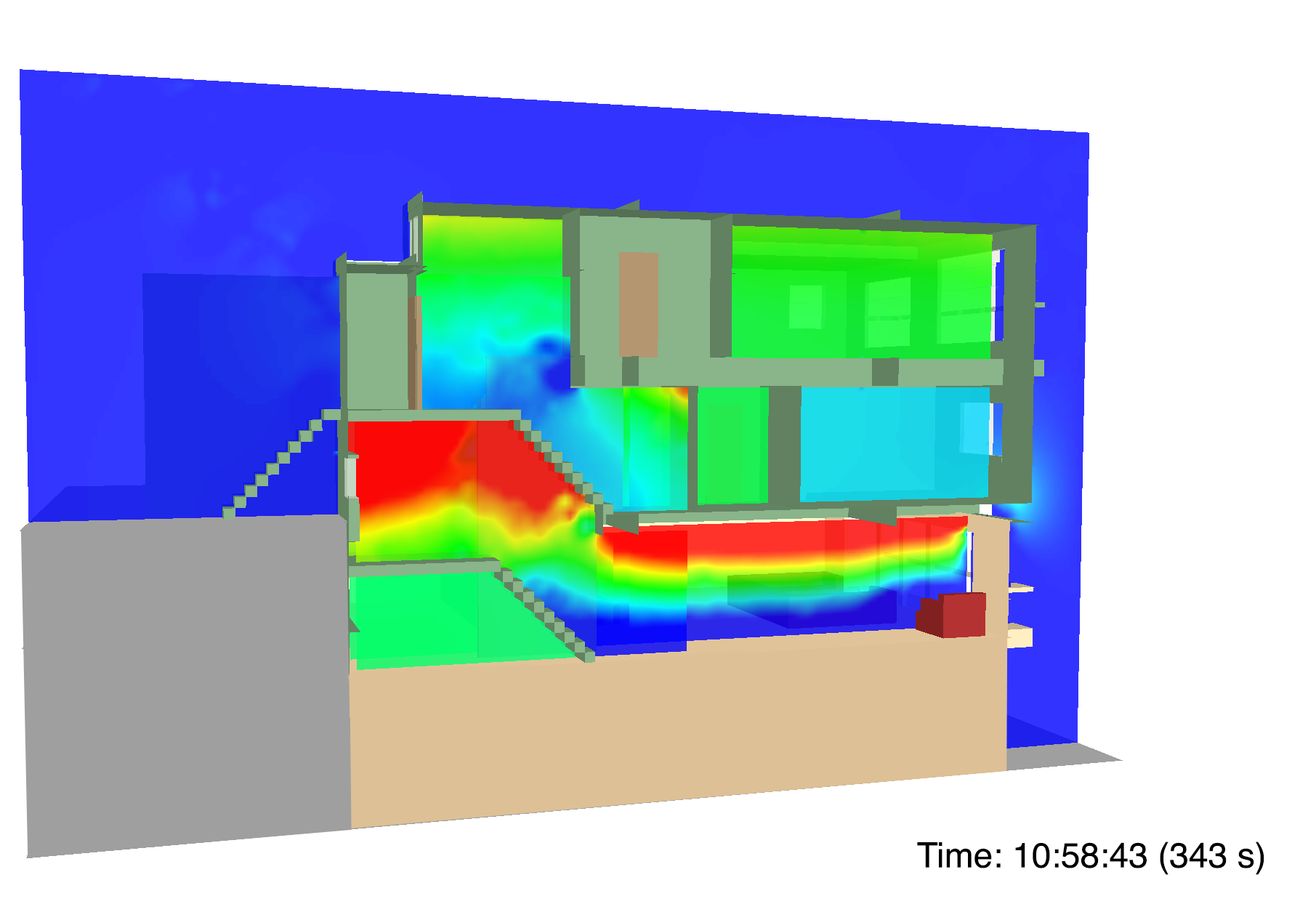
<style>
.page{position:relative;width:1308px;height:912px;background:#ffffff}
.page>*{position:absolute;margin:0}
.t1{font:34.9px "Helvetica";color:#000000}
</style>
<div class="page">
<p class="t1" style="left:917px;top:841px;width:347px;height:34px">Time: 10:58:43 (343 s)</p>
</div>
